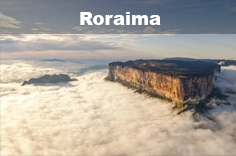
<style>
.page{position:relative;width:236px;height:156px}
.page>*{position:absolute;margin:0}
.t1{font:18px "Arial-Black";color:#ffffff}
</style>
<div class="page">
<p class="t1" style="left:80px;top:12px;width:81px;height:13px">Roraima</p>
</div>
